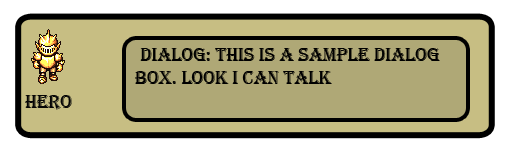
<style>
.page{position:relative;width:509px;height:158px;background:#afa876}
.page>*{position:absolute;margin:0}
.t1{font:18.7px "Algerian";color:#000000}
.t2{font:18.7px "Algerian";color:#060606}
</style>
<div class="page">
<p class="t1" style="left:135px;top:48px;width:305px;height:36px">Dialog: This is a sample dialog<br>Box. look i can talk</p>
<p class="t2" style="left:25px;top:95px;width:47px;height:15px">Hero</p>
</div>
